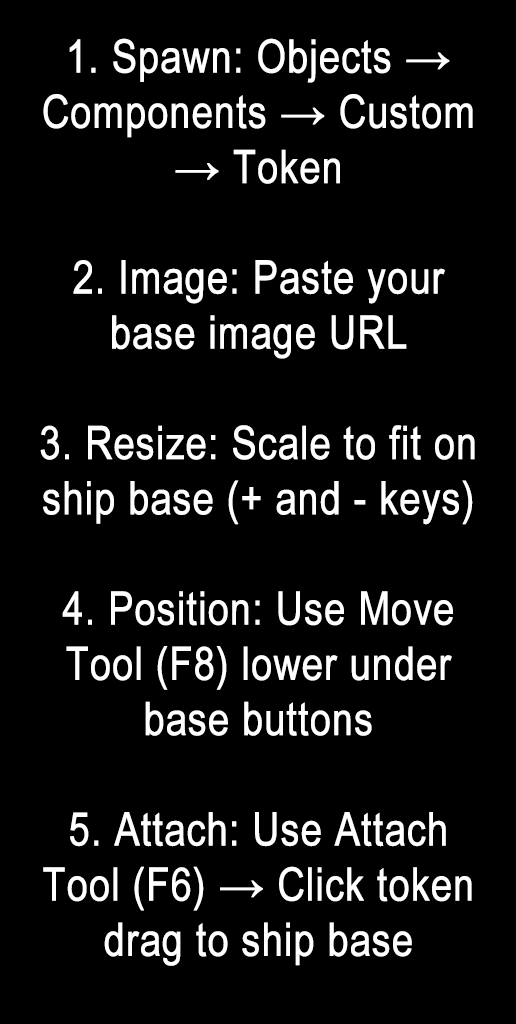
<style>
.page{position:relative;width:516px;height:1024px;background:#000000}
.page>*{position:absolute;margin:0}
.t1{font:46px "ArialNarrow";color:#ffffff;font-weight:bold}
</style>
<div class="page">
<p class="t1" style="left:40px;top:38px;width:435px;height:928px;text-align:center">1. Spawn: Objects → Components → Custom → Token<br><br>2. Image: Paste your <br>base image URL<br><br>3. Resize: Scale to fit on ship base (+ and - keys)<br> <br>4. Position: Use Move <br>Tool (F8) lower under <br>base buttons<br><br>5. Attach: Use Attach <br>Tool (F6) → Click token drag to ship base</p>
</div>
